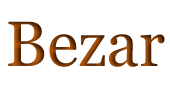
<style>
.page{position:relative;width:170px;height:86px;background:#ffffff}
.page>*{position:absolute;margin:0}
.t1{font:64px "Vani"}
</style>
<div class="page">
<p class="t1" style="left:8px;top:21px;width:157px;height:46px">Bezar</p>
</div>
